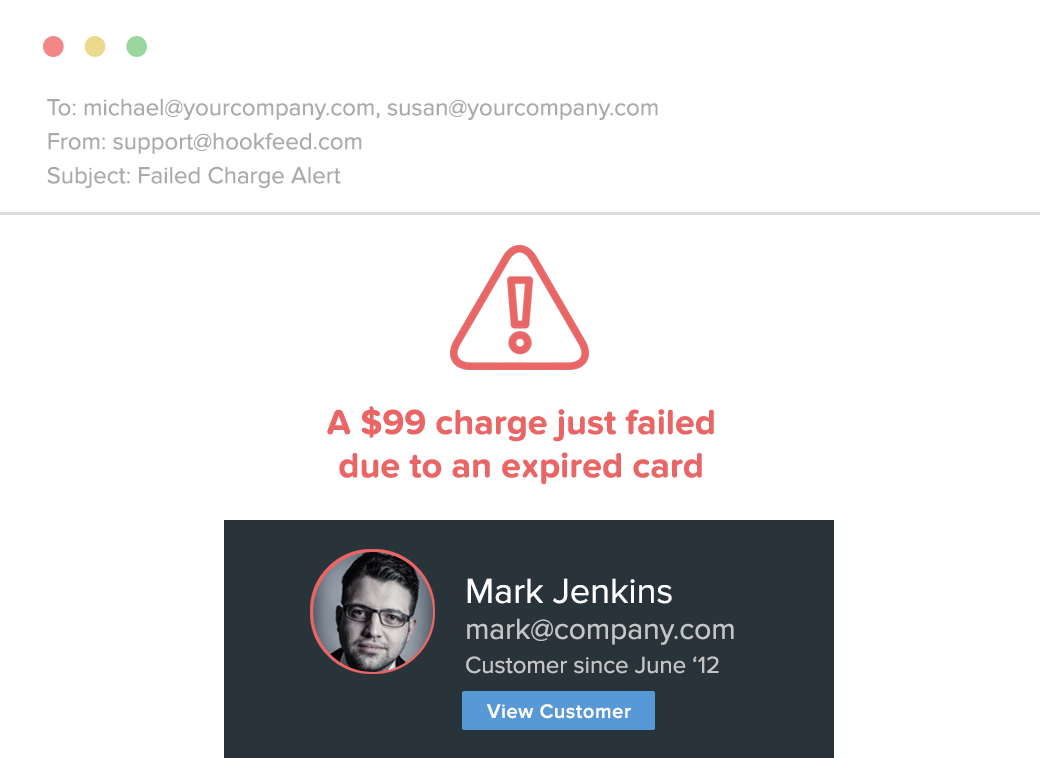
<style>
.page{position:relative;width:1040px;height:758px;background:#ffffff}
.page>*{position:absolute;margin:0}
.t1{font:24px/34px "ProximaNova-Regular";color:#aaaaaa}
.t2{font:36px "ProximaNovaSoft-Bold";color:#ea6565}
.t3{font:24px/34px "ProximaNova-Regular";color:#c4c5c5}
.t4{font:36px/50px "ProximaNova-Regular";color:#ffffff}
.t5{font:30px/36px "ProximaNova-Regular";color:#c4c5c5}
.t6{font:20px "ProximaNova-Semibold";letter-spacing:0.03em;color:#ffffff}
</style>
<div class="page">
<p class="t1" style="left:47px;top:99px;width:611px;height:89px">To: michael@yourcompany.com, susan@yourcompany.com<br>From: support@hookfeed.com<br>Subject: Failed Charge Alert</p>
<p class="t2" style="left:327px;top:406px;width:387px;height:79px;text-align:center">A $99 charge just failed<br>due to an expired card</p>
<p class="t3" style="left:466px;top:578px;width:268px;height:96px"><span class="t4">Mark Jenkins<br></span><span class="t5">mark@company.com<br></span>Customer since June ‘12</p>
<p class="t6" style="left:487px;top:704px;width:144px;height:15px">View Customer</p>
</div>
